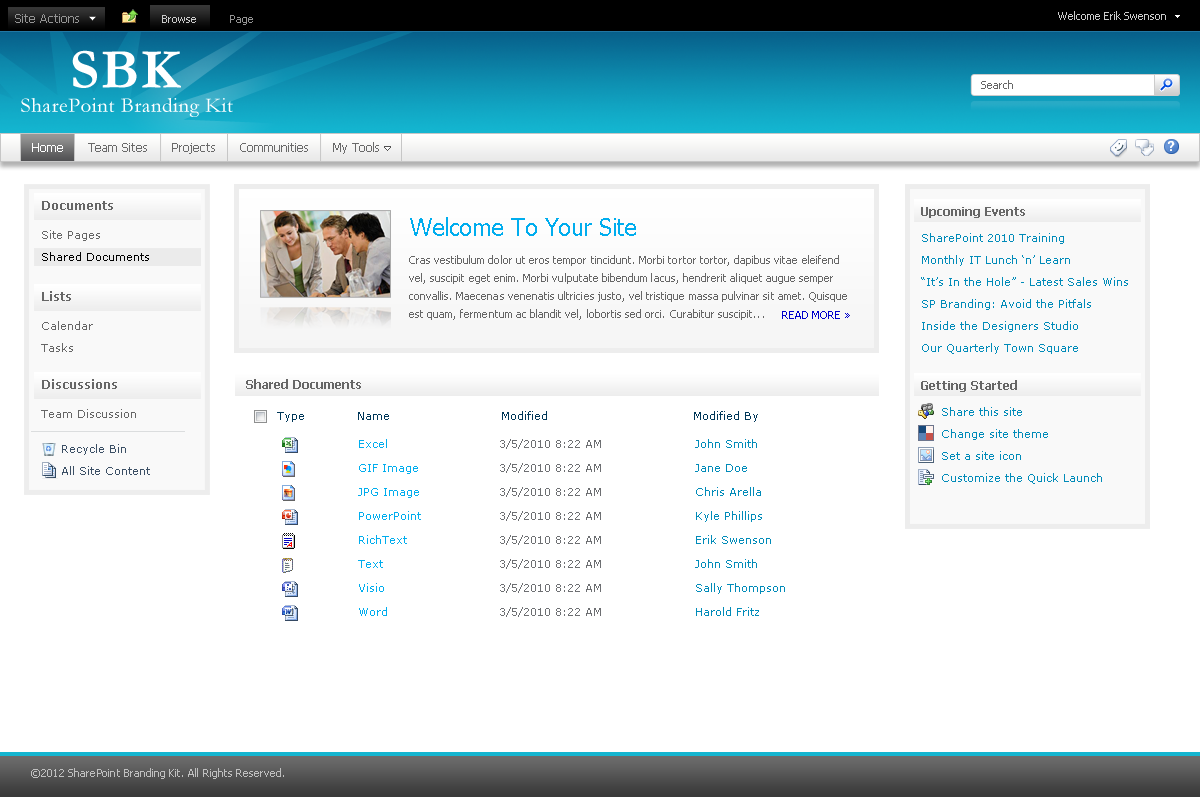
<style>
.page{position:relative;width:1200px;height:797px;background:#ffffff}
.page>*{position:absolute;margin:0}
.t1{font:12px "Tahoma";color:#949494}
.t2{font:11px "Tahoma";color:#cbcbcb}
.t3{font:11px "Tahoma";color:#959595}
.t4{font:57px "Garamond-Bold";letter-spacing:0.025em;color:#ffffff}
.t5{font:11px "Tahoma";letter-spacing:0.005em;color:#666666}
.t6{font:21px "Garamond";letter-spacing:0.025em;color:#ffffff}
.t7{font:12px "Tahoma";color:#696969}
.t8{font:12px "Tahoma";color:#ffffff}
.t9{font:12px "Verdana-Bold";color:#666666}
.t10{font:12px "Tahoma-Bold";color:#666666}
.t11{font:24px "Tahoma";letter-spacing:-0.02em;color:#00adee}
.t12{font:11px/22px "Verdana";color:#010101}
.t13{font:11px/22px "Verdana";color:#666666}
.t14{font:11px/22px "Verdana";color:#018bb9}
.t15{font:11px/18px "Tahoma";letter-spacing:0.005em;color:#666666}
.t16{font:11px "Tahoma";letter-spacing:0.005em;color:#0000cc}
.t17{font:11px "Verdana";color:#666666}
.t18{font:11px "Verdana";color:#003759}
.t19{font:11px "Verdana";color:#3b4f65}
.t20{font:11px/24px "Verdana";color:#00adee}
.t21{font:11px/24px "Verdana";color:#6d6f72}
.t22{font:11px/24px "Verdana";color:#018bb9}
.t23{font:11px "Tahoma";letter-spacing:0.005em;color:#c0c0c0}
</style>
<div class="page">
<p class="t1" style="left:15px;top:14px;width:64px;height:9px">Site Actions</p>
<p class="t2" style="left:162px;top:15px;width:91px;height:10px">Browse<span class="t3">           Page</span></p>
<p class="t2" style="left:1058px;top:11px;width:108px;height:9px">Welcome Erik Swenson</p>
<p class="t4" style="left:72px;top:50px;width:109px;height:38px">SBK</p>
<p class="t5" style="left:981px;top:80px;width:32px;height:9px">Search</p>
<p class="t6" style="left:21px;top:98px;width:212px;height:19px">SharePoint Branding Kit</p>
<p class="t7" style="left:32px;top:142px;width:347px;height:12px"><span class="t8">Home</span>      Team Sites      Projects      Communities      My Tools</p>
<p class="t9" style="left:42px;top:201px;width:71px;height:9px">Documents</p>
<p class="t10" style="left:921px;top:207px;width:104px;height:11px">Upcoming Events</p>
<p class="t11" style="left:410px;top:217px;width:226px;height:19px">Welcome To Your Site</p>
<p class="t12" style="left:42px;top:230px;width:107px;height:31px"><span class="t13">Site Pages<br></span>Shared Documents</p>
<p class="t14" style="left:921px;top:233px;width:207px;height:121px">SharePoint 2010 Training<br>Monthly IT Lunch ‘n’ Learn<br>“It’s In the Hole” - Latest Sales Wins<br>SP Branding: Avoid the Pitfals<br>Inside the Designers Studio<br>Our Quarterly Town Square</p>
<p class="t15" style="left:409px;top:255px;width:438px;height:65px">Cras vestibulum dolor ut eros tempor tincidunt. Morbi tortor tortor, dapibus vitae eleifend vel, suscipit eget enim. Morbi vulputate bibendum lacus, hendrerit aliquet augue semper convallis. Maecenas venenatis ultricies justo, vel tristique massa pulvinar sit amet. Quisque est quam, fermentum ac blandit vel, lobortis sed orci. Curabitur suscipit...</p>
<p class="t9" style="left:42px;top:291px;width:29px;height:10px">Lists</p>
<p class="t16" style="left:782px;top:311px;width:68px;height:8px">READ MORE »</p>
<p class="t13" style="left:41px;top:321px;width:52px;height:31px">Calendar<br>Tasks</p>
<p class="t9" style="left:42px;top:379px;width:75px;height:10px">Discussions</p>
<p class="t10" style="left:246px;top:379px;width:115px;height:10px">Shared Documents</p>
<p class="t10" style="left:921px;top:380px;width:96px;height:12px">Getting Started</p>
<p class="t17" style="left:41px;top:409px;width:95px;height:9px">Team Discussion</p>
<p class="t18" style="left:277px;top:411px;width:481px;height:11px">Type    Name     Modified         Modified By</p>
<p class="t14" style="left:942px;top:407px;width:160px;height:77px">Share this site<br>Change site theme<br>Set a site icon<br>Customize the Quick Launch</p>
<p class="t19" style="left:62px;top:444px;width:64px;height:11px">Recycle Bin</p>
<p class="t20" style="left:358px;top:439px;width:63px;height:177px">Excel<br>GIF Image<br>JPG Image<br>PowerPoint<br>RichText<br>Text<br>Visio<br>Word</p>
<p class="t21" style="left:500px;top:439px;width:101px;height:178px">3/5/2010 8:22 AM<br>3/5/2010 8:22 AM<br>3/5/2010 8:22 AM<br>3/5/2010 8:22 AM<br>3/5/2010 8:22 AM<br>3/5/2010 8:22 AM<br>3/5/2010 8:22 AM<br>3/5/2010 8:22 AM</p>
<p class="t22" style="left:695px;top:439px;width:90px;height:177px">John Smith<br>Jane Doe<br>Chris Arella<br>Kyle Phillips<br>Erik Swenson<br>John Smith<br>Sally Thompson<br>Harold Fritz</p>
<p class="t19" style="left:62px;top:466px;width:88px;height:9px">All Site Content</p>
<p class="t23" style="left:31px;top:768px;width:253px;height:11px">©2012 SharePoint Branding Kit. All Rights Reserved.</p>
</div>
